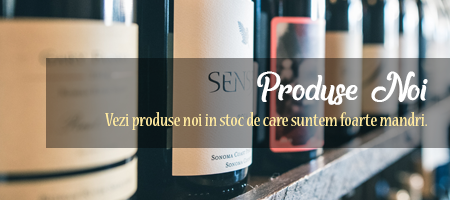
<style>
.page{position:relative;width:450px;height:200px}
.page>*{position:absolute;margin:0}
.t1{font:40px "Another-day-in-Paradise";color:#ffffff}
.t2{font:20px "NuevaStd-Cond";color:#ffeaa0}
</style>
<div class="page">
<p class="t1" style="left:257px;top:71px;width:171px;height:34px">Produse Noi</p>
<p class="t2" style="left:105px;top:112px;width:322px;height:18px">Vezi produse noi in stoc de care suntem foarte mandri.</p>
</div>
